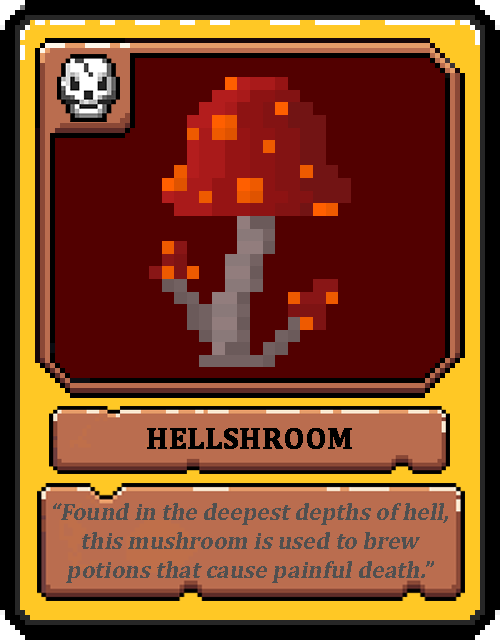
<style>
.page{position:relative;width:500px;height:640px;background:#520000}
.page>*{position:absolute;margin:0}
.t1{font:30px "Cambria-Bold";color:#000000;text-transform:uppercase;font-weight:bold}
.t2{font:24px "Cambria-Bold";color:#505050;font-style:italic}
</style>
<div class="page">
<p class="t1" style="left:147px;top:428px;width:205px;height:21px">Hellshroom</p>
<p class="t2" style="left:53px;top:503px;width:395px;height:80px;text-align:center">“Found in the deepest depths of hell, this mushroom is used to brew potions that cause painful death.”</p>
</div>
